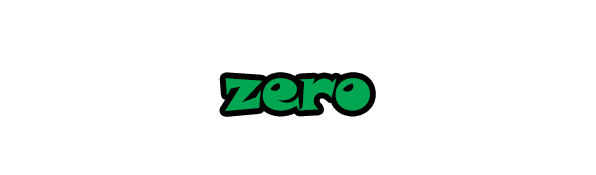
<style>
.page{position:relative;width:596px;height:175px;background:#ffffff}
.page>*{position:absolute;margin:0}
.t1{font:60px "SnapITC-Regular";color:#00a651}
</style>
<div class="page">
<p class="t1" style="left:225px;top:78px;width:145px;height:33px">zero</p>
</div>
